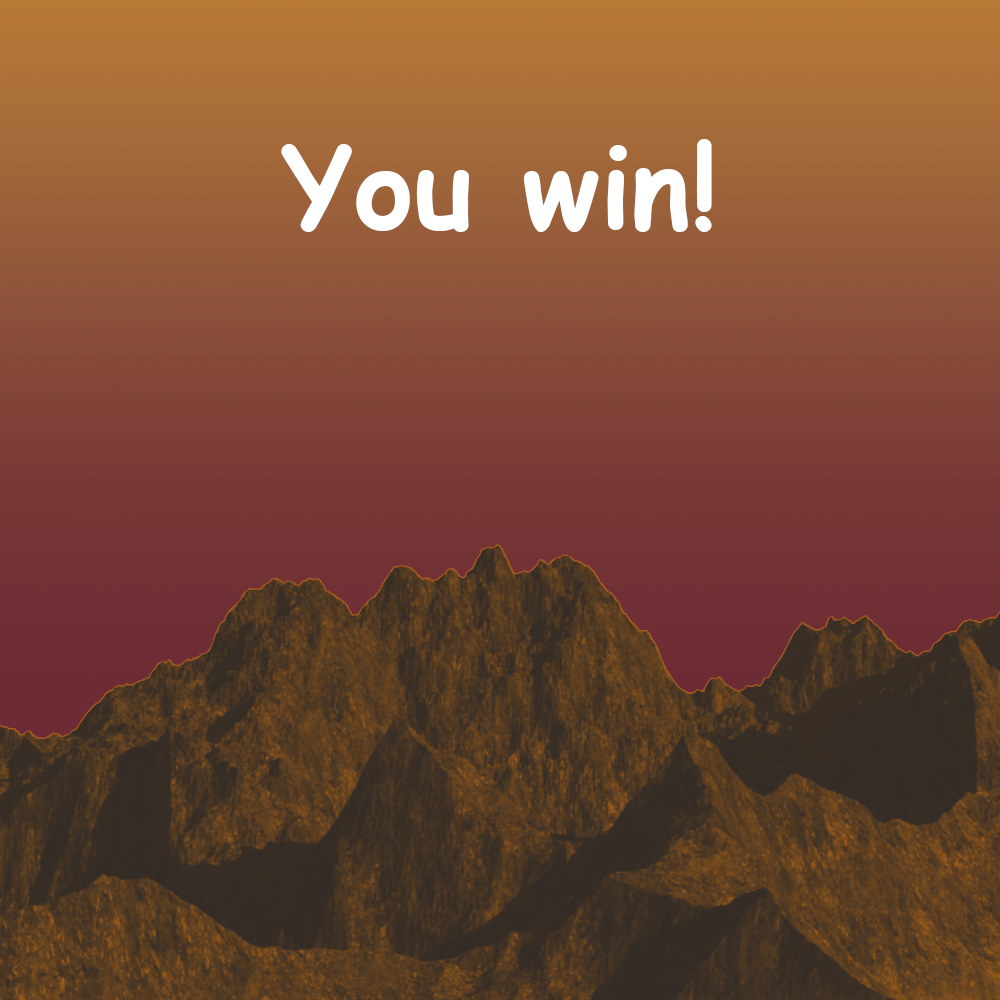
<style>
.page{position:relative;width:1000px;height:1000px}
.page>*{position:absolute;margin:0}
.t1{font:113.3px "ComicSansMS-Bold";color:#ffffff}
</style>
<div class="page">
<p class="t1" style="left:281px;top:139px;width:431px;height:93px">You win!</p>
</div>
